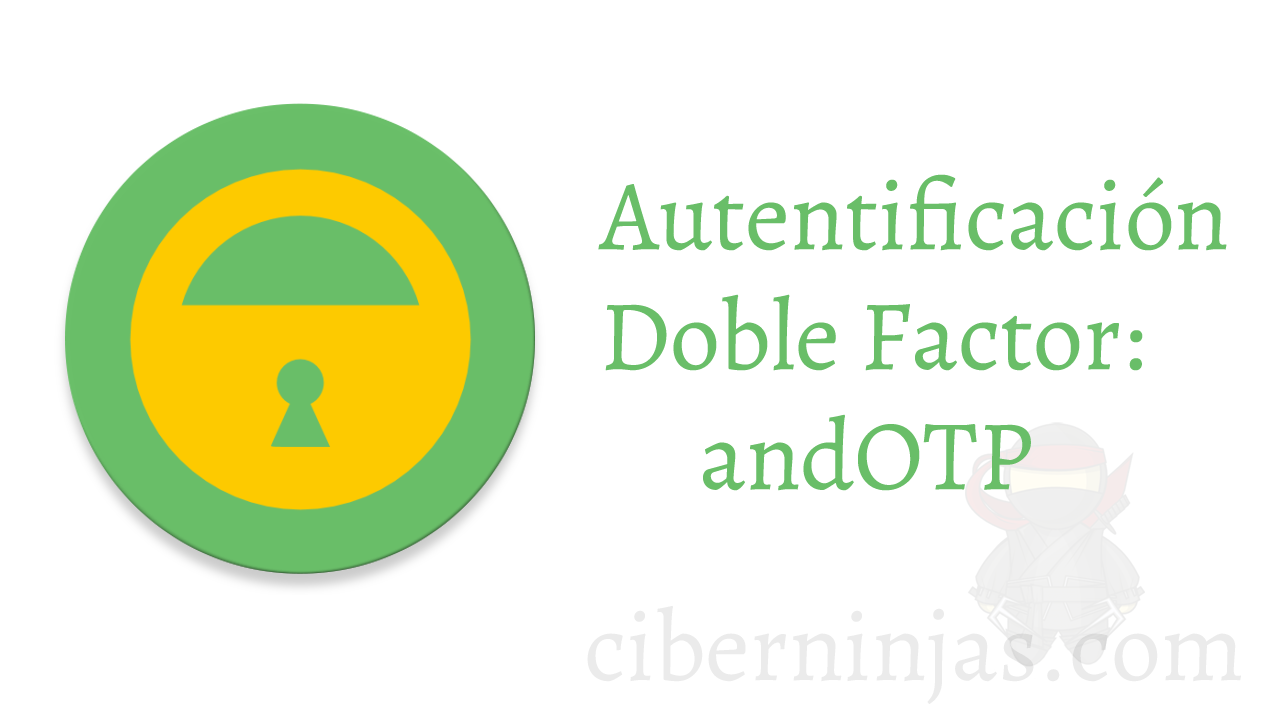
<style>
.page{position:relative;width:1280px;height:720px;background:#ffffff}
.page>*{position:absolute;margin:0}
.t1{font:100px "Alegreya-Regular";color:#69be68}
.t2{font:100px "Alegreya-Regular";color:#ebebeb}
</style>
<div class="page">
<p class="t1" style="left:598px;top:174px;width:629px;height:317px">Autentificación<br>Doble Factor:<br>     andOTP</p>
<p class="t2" style="left:587px;top:605px;width:654px;height:99px">ciberninjas.com</p>
</div>
